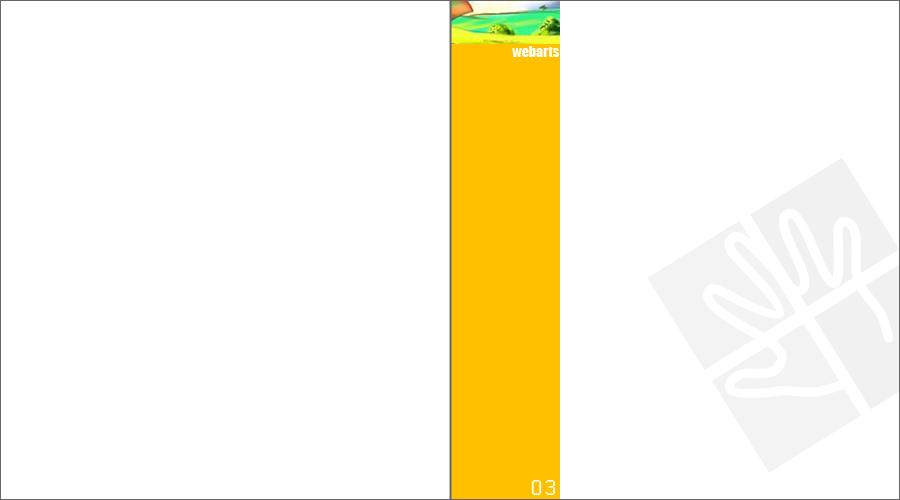
<style>
.page{position:relative;width:900px;height:500px;background:#ffffff}
.page>*{position:absolute;margin:0}
.t1{font:14px "Impact";color:#ffffff}
.t2{font:24px "Courier";color:#ffffff}
</style>
<div class="page">
<p class="t1" style="left:512px;top:46px;width:48px;height:11px">webarts</p>
<p class="t2" style="left:531px;top:480px;width:24px;height:15px">03</p>
</div>
